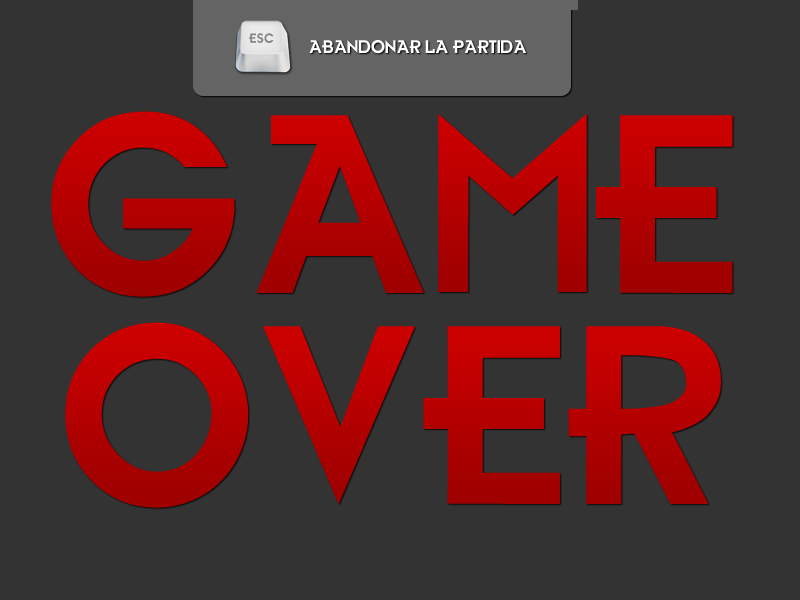
<style>
.page{position:relative;width:800px;height:600px;background:#333333}
.page>*{position:absolute;margin:0}
.t1{font:13px "Futurama";color:#868686}
.t2{font:18px "Futurama";color:#fefefe}
.t3{font:250px "Futurama";color:#b50000}
.t4{font:250px "Futurama";color:#b70000}
</style>
<div class="page">
<p class="t1" style="left:249px;top:33px;width:25px;height:10px">ESC</p>
<p class="t2" style="left:309px;top:40px;width:217px;height:14px">ABANDONAR LA PARTIDA</p>
<p class="t3" style="left:51px;top:111px;width:682px;height:186px">GAME</p>
<p class="t4" style="left:65px;top:322px;width:656px;height:186px">OVER</p>
</div>
